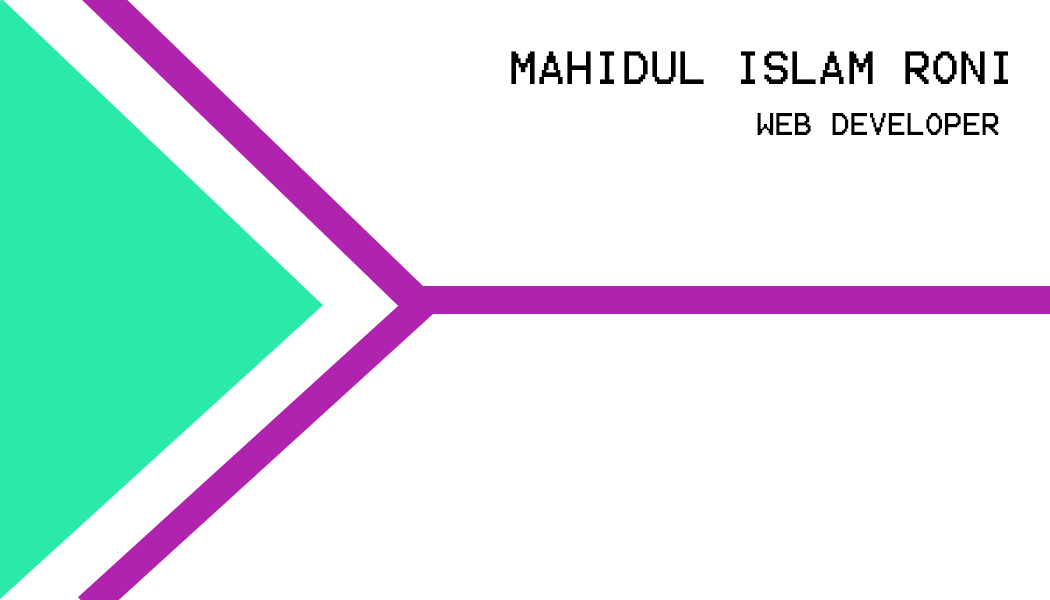
<style>
.page{position:relative;width:1050px;height:600px;background:#ffffff}
.page>*{position:absolute;margin:0}
.t1{font:37.5px "Terminal";color:#000000}
.t2{font:25px "Terminal";color:#000000}
</style>
<div class="page">
<p class="t1" style="left:511px;top:51px;width:497px;height:33px">MAHIDUL ISLAM RONI</p>
<p class="t2" style="left:757px;top:113px;width:242px;height:22px">WEB DEVELOPER</p>
</div>
